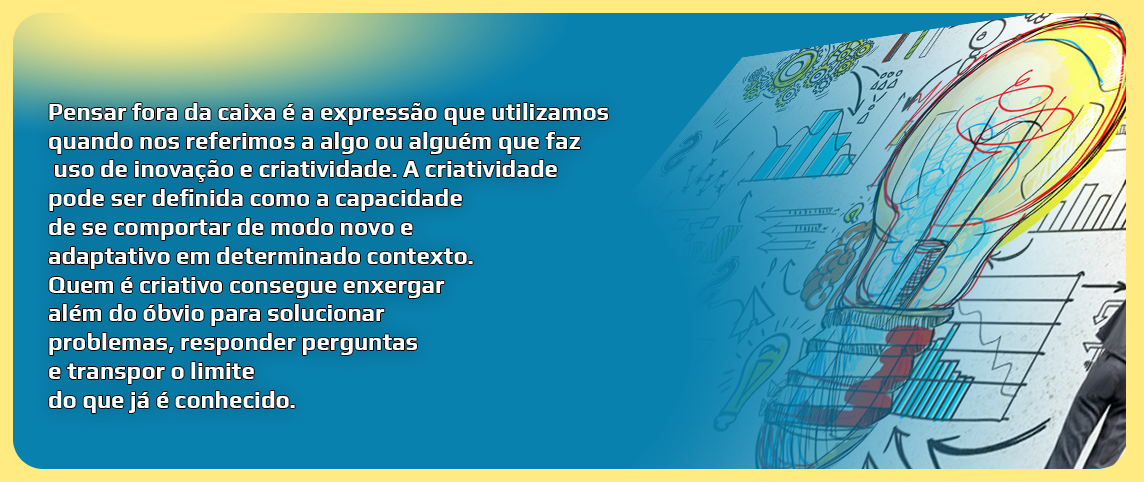
<style>
.page{position:relative;width:1144px;height:482px;background:#0981af}
.page>*{position:absolute;margin:0}
.t1{font:24px "Play-Bold";color:#ffffff}
</style>
<div class="page">
<p class="t1" style="left:48px;top:102px;width:560px;height:311px">Pensar fora da caixa é a expressão que utilizamos <br>quando nos referimos a algo ou alguém que faz<br> uso de inovação e criatividade. A criatividade <br>pode ser definida como a capacidade <br>de se comportar de modo novo e <br>adaptativo em determinado contexto. <br>Quem é criativo consegue enxergar <br>além do óbvio para solucionar <br>problemas, responder perguntas <br>e transpor o limite <br>do que já é conhecido.</p>
</div>
